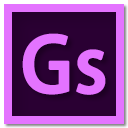
<style>
.page{position:relative;width:128px;height:128px;background:#e473ff}
.page>*{position:absolute;margin:0}
.t1{font:75px "AdobeHeitiStd-Regular";color:#e473ff;font-weight:bold}
</style>
<div class="page">
<p class="t1" style="left:22px;top:33px;width:84px;height:62px">Gs</p>
</div>
